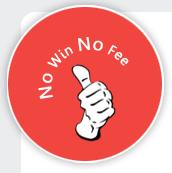
<style>
.page{position:relative;width:172px;height:173px;background:#f1463f}
.page>*{position:absolute;margin:0}
.t1{font:14px "Leelawadee";color:#ffffff;font-weight:bold}
.t2{font:18px "Leelawadee";color:#ffffff;font-weight:bold}
</style>
<div class="page">
<p class="t1" style="left:38px;top:37px;width:91px;height:62px"><span class="t2">No</span> Win <span class="t2">No</span> Fee</p>
</div>
